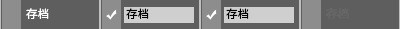
<style>
.page{position:relative;width:400px;height:29px;background:#5e5e5e}
.page>*{position:absolute;margin:0}
.t1{font:11.4px "SourceHanSansSC-Normal";color:#ffffff}
.t2{font:11.4px "SourceHanSansSC-Normal";color:#000000}
.t3{font:11.4px "SourceHanSansSC-Normal";color:#646464}
</style>
<div class="page">
<p class="t1" style="left:26px;top:8px;width:23px;height:11px">存档</p>
<p class="t2" style="left:126px;top:8px;width:23px;height:11px">存档</p>
<p class="t2" style="left:226px;top:8px;width:23px;height:11px">存档</p>
<p class="t3" style="left:326px;top:8px;width:23px;height:11px">存档</p>
</div>
